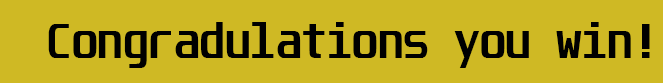
<style>
.page{position:relative;width:663px;height:83px;background:#cfb924}
.page>*{position:absolute;margin:0}
.t1{font:41.7px "Unispace-Bold";color:#000000}
</style>
<div class="page">
<p class="t1" style="left:48px;top:22px;width:602px;height:46px">Congradulations you win!</p>
</div>
